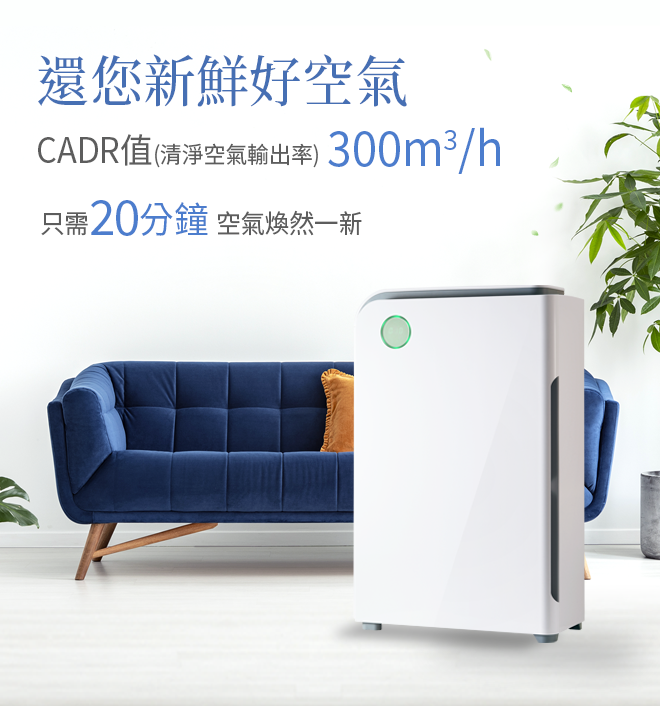
<style>
.page{position:relative;width:660px;height:706px;background:#ffffff}
.page>*{position:absolute;margin:0}
.t1{font:55.9px "SourceHanSerifTC-Medium";color:#466fb3;scale:0.95 1}
.t2{font:22.9px "SourceHanSansTC-Regular";color:#5d5d5d;scale:0.95 1}
.t3{font:34.4px "SourceHanSansTC-Regular";color:#5d5d5d;scale:0.95 1}
.t4{font:47.3px "SourceHanSansTC-Regular";color:#4c7dcd;scale:0.95 1}
.t5{font:25.8px "SourceHanSansTC-Regular";color:#5d5d5d;scale:0.95 1}
.t6{font:47.3px "SourceHanSansTC-Regular";letter-spacing:-0.025em;color:#4c7dcd}
.t7{font:36.5px "SourceHanSansTC-Regular";color:#4c7dcd;scale:0.95 1}
</style>
<div class="page">
<p class="t1" style="left:38px;top:54px;width:369px;height:53px">還您新鮮好空氣</p>
<p class="t2" style="left:38px;top:127px;width:462px;height:47px"><span class="t3">CADR值</span>(清淨空氣輸出率) <span class="t4">300m3/h</span></p>
<p class="t5" style="left:41px;top:200px;width:321px;height:36px">只需<span class="t6">20</span><span class="t7">分鐘 </span>空氣煥然一新</p>
</div>
